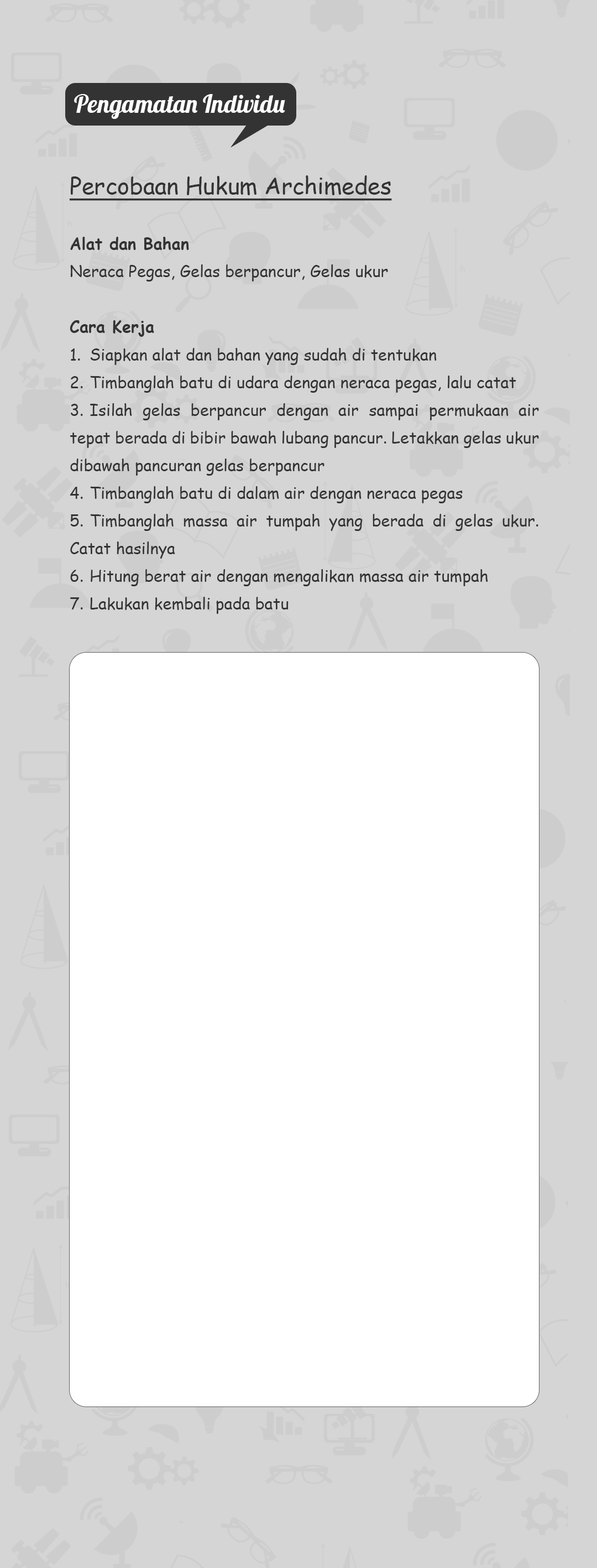
<style>
.page{position:relative;width:597px;height:1568px;background:#d5d5d5}
.page>*{position:absolute;margin:0}
.t1{font:24.6px "Lobster-Regular";color:#ffffff}
.t2{font:16.1px/27.7px "ComicSansMS";color:#333333}
.t3{font:23.1px/27.7px "ComicSansMS";color:#333333;text-decoration:underline}
.t4{font:16.1px/27.7px "ComicSansMS-Bold";color:#333333}
</style>
<div class="page">
<p class="t1" style="left:74px;top:94px;width:211px;height:25px">Pengamatan Individu</p>
<p class="t2" style="left:69px;top:175px;width:470px;height:439px;text-align:justify"><span class="t3">Percobaan Hukum Archimedes<br></span><span class="t4"><br>Alat dan Bahan <br></span>Neraca Pegas, Gelas berpancur, Gelas ukur<br><br><span class="t4">Cara Kerja<br></span>1. Siapkan alat dan bahan yang sudah di tentukan<br>2. Timbanglah batu di udara dengan neraca pegas, lalu catat<br>3. Isilah gelas berpancur dengan air sampai permukaan air tepat berada di bibir bawah lubang pancur. Letakkan gelas ukur dibawah pancuran gelas berpancur<br>4. Timbanglah batu di dalam air dengan neraca pegas<br>5. Timbanglah massa air tumpah yang berada di gelas ukur. Catat hasilnya<br>6. Hitung berat air dengan mengalikan massa air tumpah<br>7. Lakukan kembali pada batu</p>
</div>
